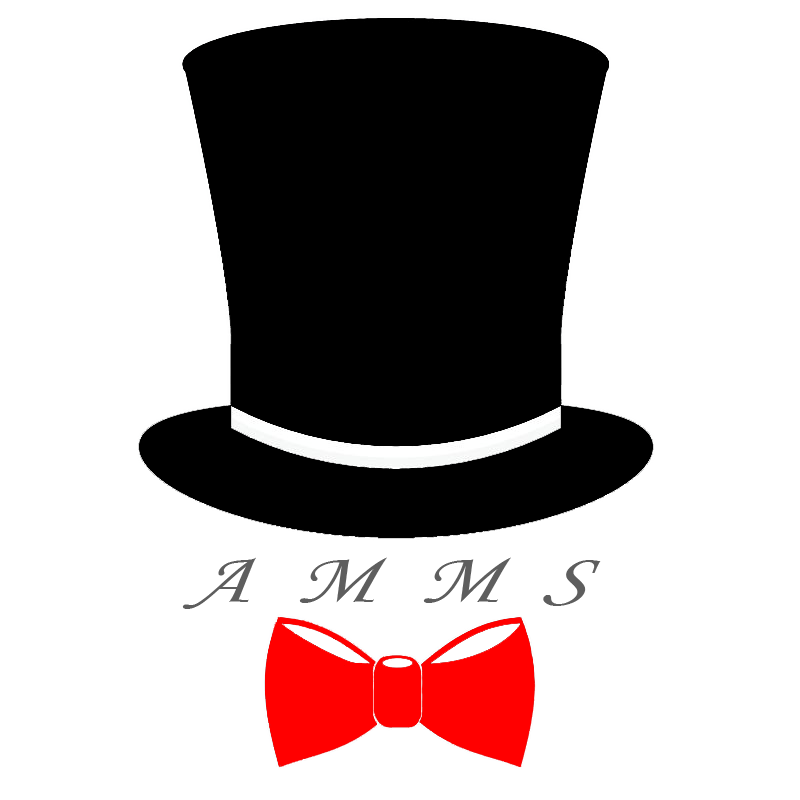
<style>
.page{position:relative;width:800px;height:800px;background:#ffffff}
.page>*{position:absolute;margin:0}
.t1{font:70.5px "STLiti";color:#5e5e5e;font-style:italic;scale:1.33 1}
</style>
<div class="page">
<p class="t1" style="left:182px;top:557px;width:419px;height:52px">A  M  M  S</p>
</div>
